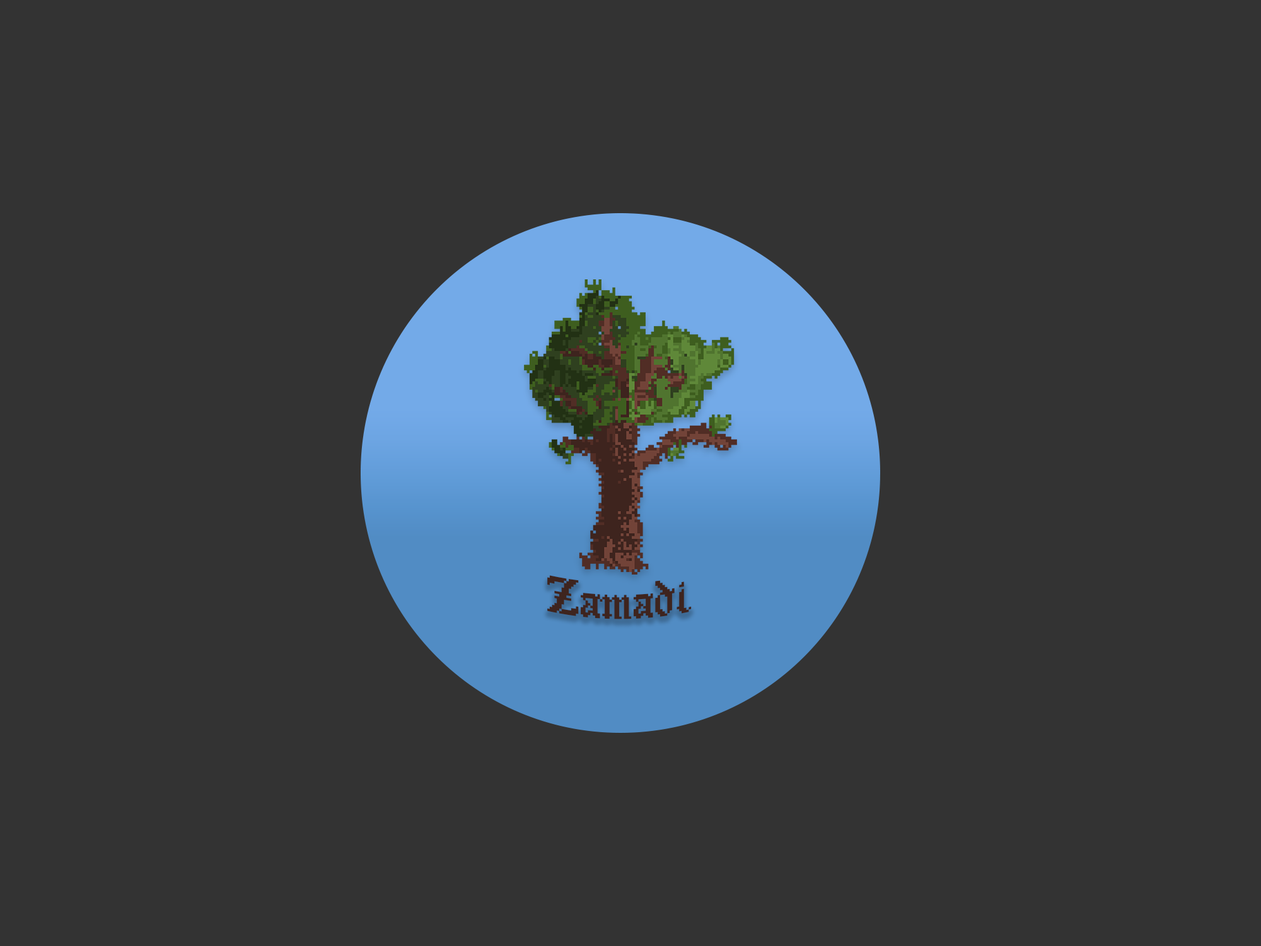
<style>
.page{position:relative;width:1261px;height:946px;background:#333333}
.page>*{position:absolute;margin:0}
.t1{font:47.9px "Old-English-Gothic-Pixel";color:#3e241e}
</style>
<div class="page">
<p class="t1" style="left:547px;top:575px;width:145px;height:44px">Zamadi</p>
</div>
